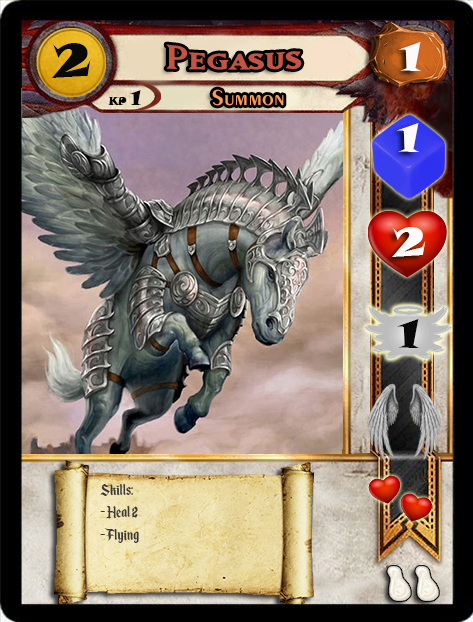
<style>
.page{position:relative;width:473px;height:622px}
.page>*{position:absolute;margin:0}
.t1{font:46.6px "SnapITC-Regular";color:#090909;scale:1.05 1}
.t2{font:40px "MatrixBoldSmallCaps";color:#c25443;scale:1.06 1}
.t3{font:40px "SnapITC-Regular";color:#fef9f9;scale:1.05 1}
.t4{font:22.7px "Exotic350BT-DemiBold";color:#f89c64;scale:1.06 1}
.t5{font:10.7px "SnapITC-Regular";color:#090909}
.t6{font:20.5px "SnapITC-Regular";color:#090909}
.t7{font:40px "SnapITC-Regular";color:#090909;scale:1.05 1}
.t8{font:18.7px "EnchantedLand";color:#3e3939}
</style>
<div class="page">
<p class="t1" style="left:51px;top:43px;width:40px;height:35px">2</p>
<p class="t2" style="left:166px;top:44px;width:136px;height:26px">Pegasus</p>
<p class="t3" style="left:399px;top:42px;width:22px;height:29px">1</p>
<p class="t4" style="left:212px;top:89px;width:72px;height:17px">Summon</p>
<p class="t5" style="left:108px;top:90px;width:33px;height:15px">KP <span class="t6">1</span></p>
<p class="t3" style="left:397px;top:123px;width:22px;height:29px">1</p>
<p class="t3" style="left:392px;top:227px;width:34px;height:30px">2</p>
<p class="t7" style="left:397px;top:319px;width:22px;height:29px">1</p>
<p class="t8" style="left:100px;top:483px;width:39px;height:60px">Skills:<br>- Heal 2<br>- Flying</p>
</div>
